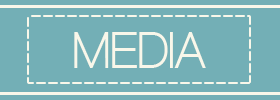
<style>
.page{position:relative;width:280px;height:100px;background:#73afb6}
.page>*{position:absolute;margin:0}
.t1{font:50px "Aliquam";color:#f9f7ea}
</style>
<div class="page">
<p class="t1" style="left:74px;top:32px;width:132px;height:36px">MEDIA</p>
</div>
